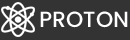
<style>
.page{position:relative;width:130px;height:40px;background:#333333}
.page>*{position:absolute;margin:0}
.t1{font:22px "Poppins-Medium";color:#ffffff;text-transform:uppercase}
</style>
<div class="page">
<p class="t1" style="left:40px;top:11px;width:88px;height:17px">PROTON</p>
</div>
